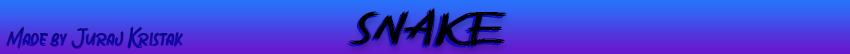
<style>
.page{position:relative;width:850px;height:54px}
.page>*{position:absolute;margin:0}
.t1{font:48px "Sabotase-Regular";scale:1.56 1}
.t2{font:48px "Sabotase-Regular";color:#000000;scale:1.57 1}
.t3{font:29.8px "Sabotase-Regular";color:#0e0799}
</style>
<div class="page">
<p class="t1" style="left:346px;top:9px;width:158px;height:40px">SNAKE</p>
<p class="t2" style="left:348px;top:7px;width:159px;height:40px">SNAKE</p>
<p class="t3" style="left:6px;top:26px;width:177px;height:23px">Made by Juraj Kristak</p>
</div>
